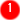
<style>
.page{position:relative;width:20px;height:20px;background:#ff0000}
.page>*{position:absolute;margin:0}
.t1{font:14px "Vrinda";color:#ffffff}
</style>
<div class="page">
<p class="t1" style="left:8px;top:3px;width:3px;height:9px">1</p>
</div>
